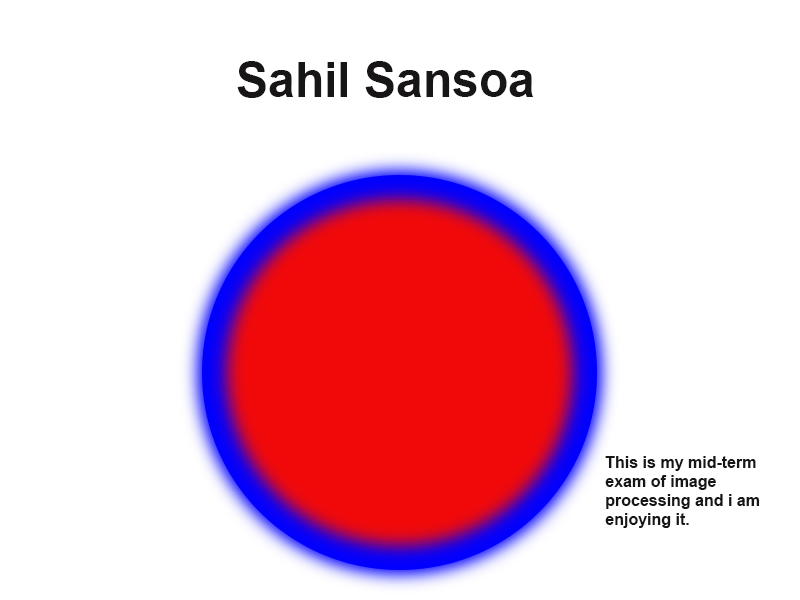
<style>
.page{position:relative;width:800px;height:600px;background:#ffffff}
.page>*{position:absolute;margin:0}
.t1{font:48px "Arial-BoldMT";color:#171515}
.t2{font:16px "Arial-BoldMT";color:#171515}
</style>
<div class="page">
<p class="t1" style="left:237px;top:61px;width:297px;height:37px">Sahil Sansoa</p>
<p class="t2" style="left:605px;top:456px;width:155px;height:72px">This is my mid-term <br>exam of image<br>processing and i am <br>enjoying it.</p>
</div>
